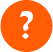
<style>
.page{position:relative;width:53px;height:52px;background:#ff5c03}
.page>*{position:absolute;margin:0}
.t1{font:50px "Narkisim";color:#ffffff}
</style>
<div class="page">
<p class="t1" style="left:20px;top:11px;width:13px;height:28px">?</p>
</div>
